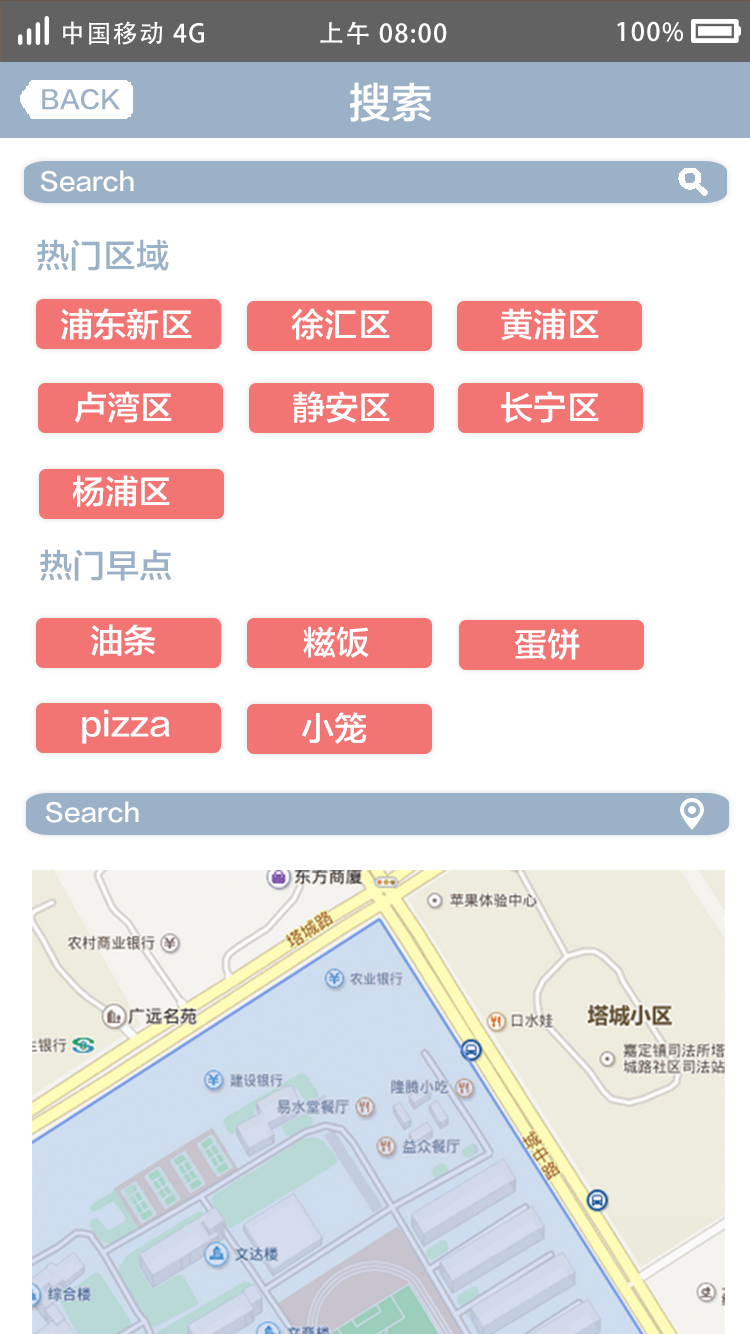
<style>
.page{position:relative;width:750px;height:1334px;background:#ffffff}
.page>*{position:absolute;margin:0}
.t1{font:25px "AdobeHeitiStd-Regular";letter-spacing:0.06em;color:#ffffff}
.t2{font:25px "FZLTZHK--GBK1-0";color:#9bb1c8;text-transform:uppercase}
.t3{font:41.7px "FZLTZHK--GBK1-0";color:#ffffff;text-transform:uppercase}
.t4{font:25px "FZLTZHK--GBK1-0";color:#ffffff}
.t5{font:33.3px "FZLTZHK--GBK1-0";color:#9bb1c8}
.t6{font:33.3px "FZLTZHK--GBK1-0";color:#ffffff}
</style>
<div class="page">
<p class="t1" style="left:63px;top:21px;width:141px;height:24px">中国移动 4G</p>
<p class="t1" style="left:320px;top:21px;width:127px;height:24px">上午 08:00</p>
<p class="t1" style="left:617px;top:21px;width:66px;height:21px">100%</p>
<p class="t2" style="left:42px;top:88px;width:78px;height:22px">back</p>
<p class="t3" style="left:350px;top:82px;width:82px;height:40px">搜索</p>
<p class="t4" style="left:40px;top:170px;width:94px;height:22px">Search</p>
<p class="t5" style="left:37px;top:239px;width:132px;height:32px">热门区域</p>
<p class="t6" style="left:60px;top:308px;width:132px;height:32px">浦东新区</p>
<p class="t6" style="left:291px;top:308px;width:99px;height:32px">徐汇区</p>
<p class="t6" style="left:501px;top:308px;width:98px;height:32px">黄浦区</p>
<p class="t6" style="left:74px;top:391px;width:98px;height:32px">卢湾区</p>
<p class="t6" style="left:293px;top:391px;width:97px;height:32px">静安区</p>
<p class="t6" style="left:501px;top:391px;width:98px;height:32px">长宁区</p>
<p class="t6" style="left:72px;top:475px;width:98px;height:32px">杨浦区</p>
<p class="t5" style="left:40px;top:549px;width:132px;height:32px">热门早点</p>
<p class="t6" style="left:91px;top:624px;width:65px;height:32px">油条</p>
<p class="t6" style="left:303px;top:626px;width:66px;height:32px">糍饭</p>
<p class="t6" style="left:515px;top:628px;width:65px;height:32px">蛋饼</p>
<p class="t6" style="left:82px;top:709px;width:88px;height:35px">pizza</p>
<p class="t6" style="left:302px;top:712px;width:65px;height:32px">小笼</p>
<p class="t4" style="left:45px;top:801px;width:94px;height:22px">Search</p>
</div>
